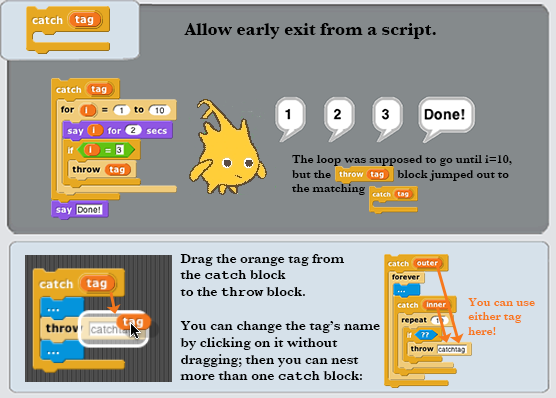
<style>
.page{position:relative;width:556px;height:398px;background:#858a8c}
.page>*{position:absolute;margin:0}
.t1{font:18px "Baskerville-Bold";color:#000000}
.t2{font:12px "Baskerville-SemiBold";color:#000000}
.t3{font:14px "Baskerville-SemiBold";color:#000000}
.t4{font:14px "CourierCE-Bold";color:#000000}
.t5{font:12px "Baskerville-SemiBold";color:#f7781d}
</style>
<div class="page">
<p class="t1" style="left:184px;top:23px;width:252px;height:16px">Allow early exit from a script.</p>
<p class="t2" style="left:292px;top:155px;width:220px;height:40px">The loop was supposed to go until i=10,<br>but the                      block jumped out to<br>the matching</p>
<p class="t3" style="left:180px;top:254px;width:200px;height:126px">Drag the orange tag from<br>the <span class="t4">catch</span> block<br>to the <span class="t4">throw</span> block.<br><br>You can change the tag’s name<br>by clicking on it without<br>dragging; then you can nest<br>more than one <span class="t4">catch</span> block:</p>
<p class="t5" style="left:468px;top:298px;width:67px;height:37px">You can use<br>either tag<br>here!</p>
</div>
